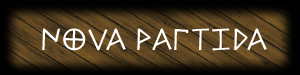
<style>
.page{position:relative;width:300px;height:75px}
.page>*{position:absolute;margin:0}
.t1{font:32px "Alfabetix";color:#ffffff}
</style>
<div class="page">
<p class="t1" style="left:42px;top:28px;width:225px;height:23px">NOVA PARTIDA</p>
</div>
